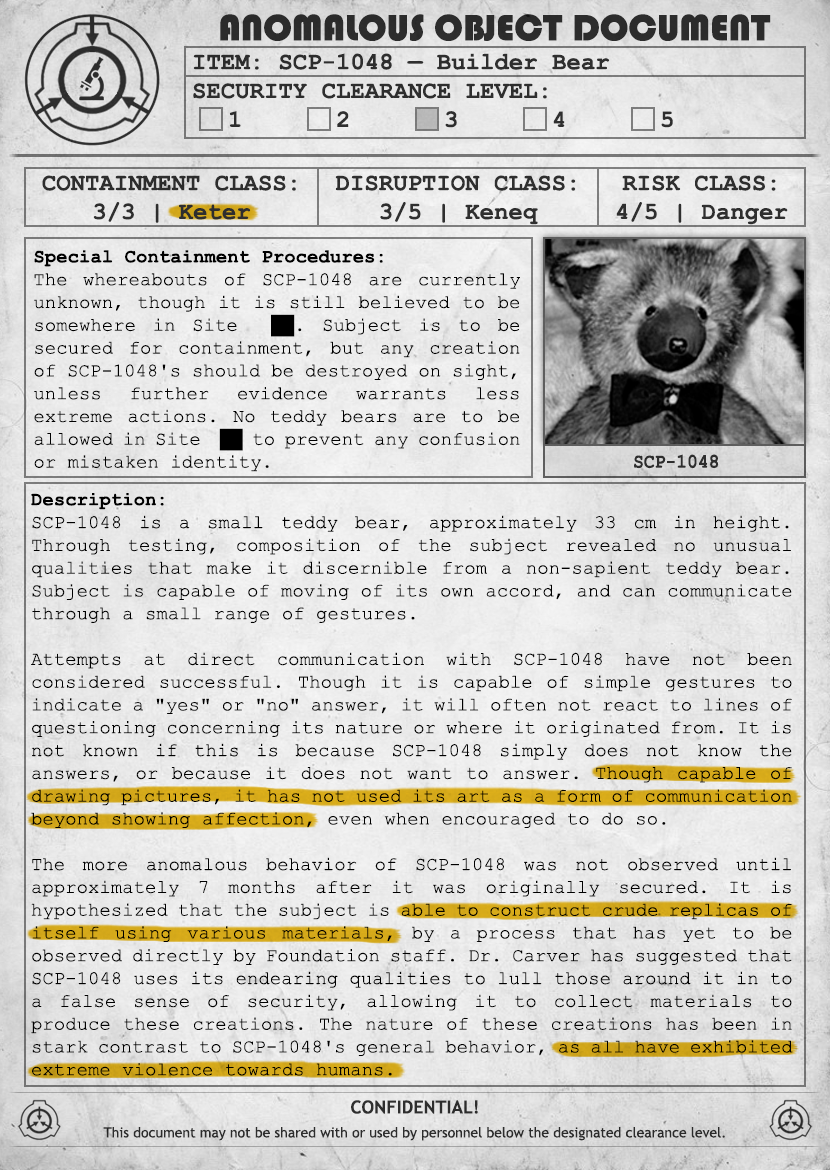
<style>
.page{position:relative;width:830px;height:1170px}
.page>*{position:absolute;margin:0}
.t1{font:38px "Bauhaus93";color:#333333;text-transform:uppercase}
.t2{font:24px "CourierNewPS-BoldMT";color:#333333}
.t3{font:24px "CourierNewPS-BoldMT";color:#333333;text-transform:uppercase}
.t4{font:19px "CourierNewPSMT";color:#000000}
.t5{font:19px "CourierNewPS-BoldMT";color:#000000}
.t6{font:20.1px "CourierNewPS-BoldMT";color:#333333;scale:0.9 1}
.t7{font:14px/24px "TrebuchetMS";color:#333333}
.t8{font:18px/24px "TrebuchetMS-Bold";color:#333333}
</style>
<div class="page">
<p class="t1" style="left:220px;top:14px;width:551px;height:27px">anomalous object document</p>
<p class="t2" style="left:193px;top:53px;width:480px;height:75px">ITEM: SCP-1048 — Builder Bear<br><span class="t3">Security CLEARANCE LEVEL:</span> <br> 1   2   3   4   5</p>
<p class="t2" style="left:42px;top:175px;width:254px;height:48px;text-align:center">CONTAINMENT CLASS:<br>3/3 | Keter</p>
<p class="t2" style="left:335px;top:175px;width:241px;height:50px;text-align:center">DISRUPTION CLASS:<br>3/5 | Keneq</p>
<p class="t2" style="left:616px;top:175px;width:172px;height:50px;text-align:center">RISK CLASS:<br>4/5 | Danger</p>
<p class="t4" style="left:34px;top:250px;width:486px;height:222px;text-align:justify"><span class="t5">Special Containment Procedures:<br></span>The whereabouts of SCP-1048 are currently unknown, though it is still believed to be somewhere in Site  ██. Subject is to be secured for containment, but any creation of SCP-1048's should be destroyed on sight, unless further evidence warrants less extreme actions. No teddy bears are to be allowed in Site  ██ to prevent any confusion or mistaken identity.</p>
<p class="t6" style="left:634px;top:454px;width:85px;height:15px">SCP-1048</p>
<p class="t4" style="left:31px;top:493px;width:762px;height:583px;text-align:justify"><span class="t5">Description:<br></span>SCP-1048 is a small teddy bear, approximately 33 cm in height. Through testing, composition of the subject revealed no unusual qualities that make it discernible from a non-sapient teddy bear. Subject is capable of moving of its own accord, and can communicate through a small range of gestures.<br><br>Attempts at direct communication with SCP-1048 have not been considered successful. Though it is capable of simple gestures to indicate a "yes" or "no" answer, it will often not react to lines of questioning concerning its nature or where it originated from. It is not known if this is because SCP-1048 simply does not know the answers, or because it does not want to answer. Though capable of drawing pictures, it has not used its art as a form of communication beyond showing affection, even when encouraged to do so.<br><br>The more anomalous behavior of SCP-1048 was not observed until approximately 7 months after it was originally secured. It is hypothesized that the subject is able to construct crude replicas of itself using various materials, by a process that has yet to be observed directly by Foundation staff. Dr. Carver has suggested that SCP-1048 uses its endearing qualities to lull those around it in to a false sense of security, allowing it to collect materials to produce these creations. The nature of these creations has been in stark contrast to SCP-1048's general behavior, as all have exhibited extreme violence towards humans.</p>
<p class="t7" style="left:103px;top:1100px;width:622px;height:41px;text-align:center"><span class="t8">CONFIDENTIAL!<br></span>This document may not be shared with or used by personnel below the designated clearance level.</p>
</div>
